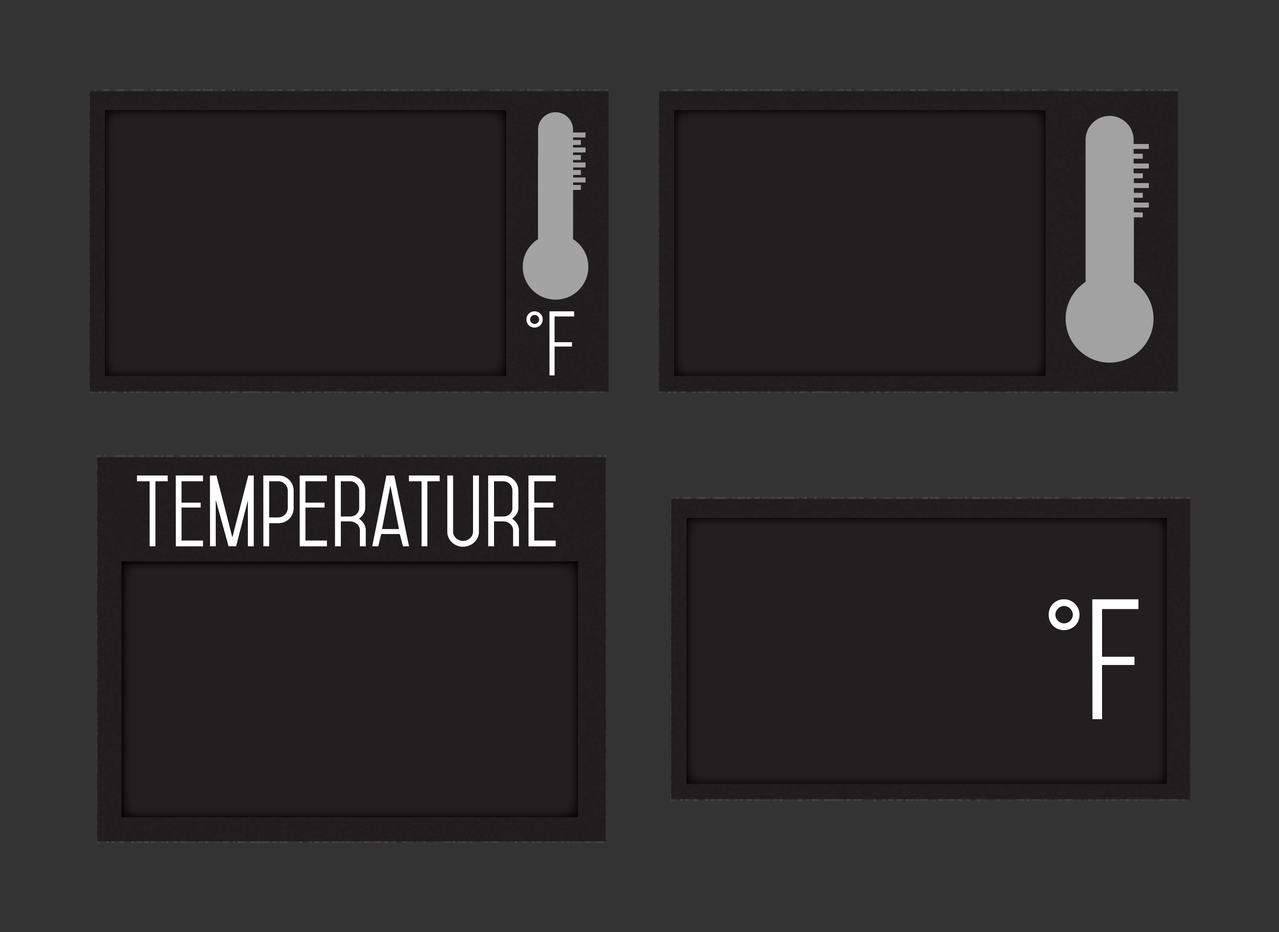
<style>
.page{position:relative;width:1279px;height:932px;background:#333333}
.page>*{position:absolute;margin:0}
.t1{font:86.6px "Mohave";color:#ffffff}
.t2{font:146.7px "Mohave";color:#ffffff}
</style>
<div class="page">
<p class="t1" style="left:137px;top:476px;width:419px;height:71px">Temperature</p>
<p class="t2" style="left:1048px;top:600px;width:90px;height:120px">°F</p>
</div>
